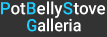
<style>
.page{position:relative;width:107px;height:37px;background:#333333}
.page>*{position:absolute;margin:0}
.t1{font:17.1px "Roboto-Medium";color:#ffffff}
.t2{font:17.1px "Roboto-Medium";color:#1fcdff}
.t3{font:17.1px "Roboto-Medium";color:#ffffff;scale:0.95 1}
.t4{font:17.1px "Roboto-Medium";color:#1fcdff;scale:0.95 1}
</style>
<div class="page">
<p class="t1" style="left:1px;top:1px;width:104px;height:17px"><span class="t2">P</span>ot<span class="t2">B</span>elly<span class="t2">S</span>tove</p>
<p class="t3" style="left:27px;top:18px;width:54px;height:14px"><span class="t4">G</span>alleria</p>
</div>
